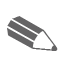
<style>
.page{position:relative;width:64px;height:64px;background:#ffffff}
.page>*{position:absolute;margin:0}
.t1{font:64px "ArialUnicodeMS";color:#656465}
</style>
<div class="page">
<p class="t1" style="left:7px;top:16px;width:51px;height:35px">✎</p>
</div>
